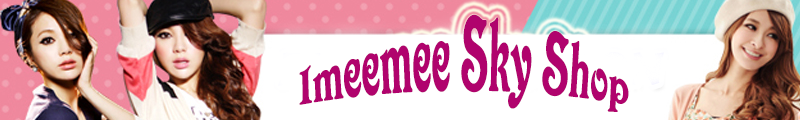
<style>
.page{position:relative;width:800px;height:120px;background:#ffffff}
.page>*{position:absolute;margin:0}
.t1{font:48px "VictorianLetPlain";color:#b0036d}
</style>
<div class="page">
<p class="t1" style="left:299px;top:14px;width:330px;height:98px;text-align:center">Imeemee Sky Shop</p>
</div>
